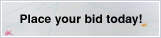
<style>
.page{position:relative;width:161px;height:38px}
.page>*{position:absolute;margin:0}
.t1{font:12px "Helvetica-Bold";letter-spacing:0.01em;color:#000000}
</style>
<div class="page">
<p class="t1" style="left:20px;top:14px;width:122px;height:12px">Place your bid today!</p>
</div>
